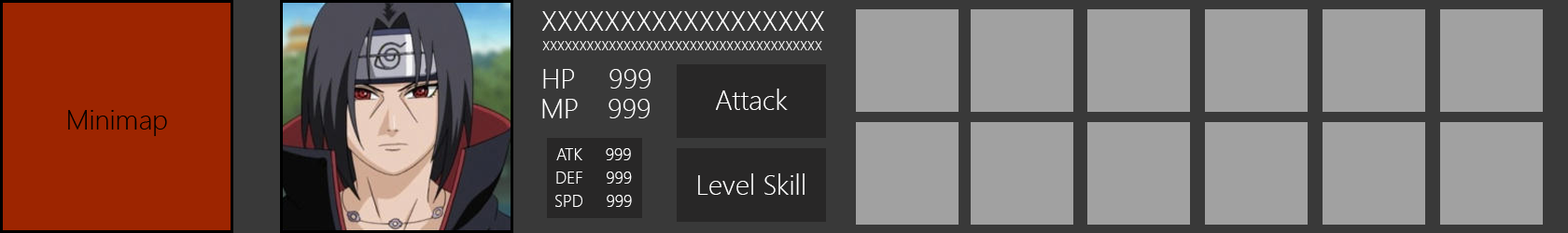
<style>
.page{position:relative;width:1568px;height:233px;background:#a1a1a1}
.page>*{position:absolute;margin:0}
.t1{font:28px "SegoeUI-Light";color:#ffffff}
.t2{font:13.1px "SegoeUI-Light";color:#ffffff}
.t3{font:16.8px "SegoeUI-Light";color:#ffffff}
</style>
<div class="page">
<p class="t1" style="left:542px;top:11px;width:282px;height:20px">XXXXXXXXXXXXXXXXXX</p>
<p class="t2" style="left:542px;top:41px;width:280px;height:9px">XXXXXXXXXXXXXXXXXXXXXXXXXXXXXXXXXXXXXX</p>
<p class="t1" style="left:543px;top:69px;width:108px;height:20px">HP 999</p>
<p class="t1" style="left:716px;top:89px;width:72px;height:21px">Attack</p>
<p class="t1" style="left:542px;top:99px;width:108px;height:20px">MP 999</p>
<p class="t3" style="left:556px;top:148px;width:75px;height:13px">ATK     999</p>
<p class="t3" style="left:556px;top:172px;width:76px;height:12px">DEF     999</p>
<p class="t1" style="left:698px;top:174px;width:107px;height:21px">Level Skill</p>
<p class="t3" style="left:555px;top:195px;width:77px;height:12px">SPD     999</p>
</div>
